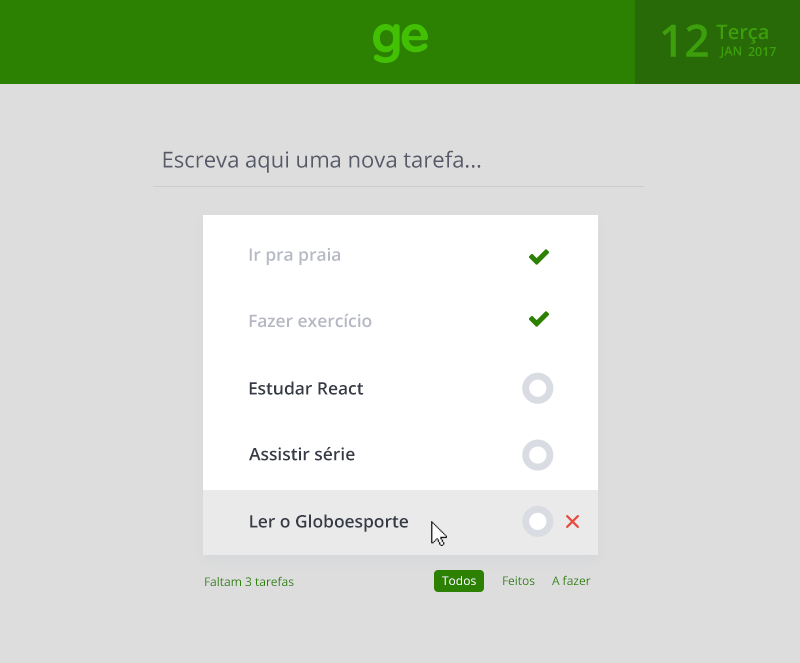
<style>
.page{position:relative;width:800px;height:663px;background:#dddddd}
.page>*{position:absolute;margin:0}
.t1{font:44.8px "OpenSans-Semibold";color:#3c9f0b}
.t2{font:20.1px "OpenSans-Semibold";color:#3c9f0b}
.t3{font:12.5px "OpenSans-Semibold";color:#3c9f0b}
.t4{font:22px "OpenSans";color:#565a68}
.t5{font:17.4px "OpenSans-Semibold";color:#b4b9c3}
.t6{font:17.4px "OpenSans-Semibold";color:#b5b8c3}
.t7{font:17.4px "OpenSans-Semibold";color:#363b46}
.t8{font:12px "OpenSans";color:#2c8002}
.t9{font:12px "OpenSans";color:#ffffff}
</style>
<div class="page">
<p class="t1" style="left:662px;top:24px;width:46px;height:33px">12</p>
<p class="t2" style="left:716px;top:24px;width:52px;height:20px">Terça</p>
<p class="t3" style="left:719px;top:46px;width:22px;height:12px">JAN</p>
<p class="t3" style="left:748px;top:47px;width:28px;height:9px">2017</p>
<p class="t4" style="left:163px;top:150px;width:318px;height:23px">Escreva aqui uma nova tarefa...</p>
<p class="t5" style="left:249px;top:247px;width:91px;height:18px">Ir pra praia</p>
<p class="t6" style="left:249px;top:313px;width:123px;height:15px">Fazer exercício</p>
<p class="t7" style="left:249px;top:381px;width:115px;height:14px">Estudar React</p>
<p class="t7" style="left:249px;top:447px;width:106px;height:14px">Assistir série</p>
<p class="t7" style="left:250px;top:514px;width:158px;height:18px">Ler o Globoesporte</p>
<p class="t8" style="left:205px;top:576px;width:89px;height:10px">Faltam 3 tarefas</p>
<p class="t9" style="left:442px;top:576px;width:34px;height:9px">Todos</p>
<p class="t8" style="left:503px;top:576px;width:32px;height:9px">Feitos</p>
<p class="t8" style="left:552px;top:575px;width:39px;height:10px">A fazer</p>
</div>
